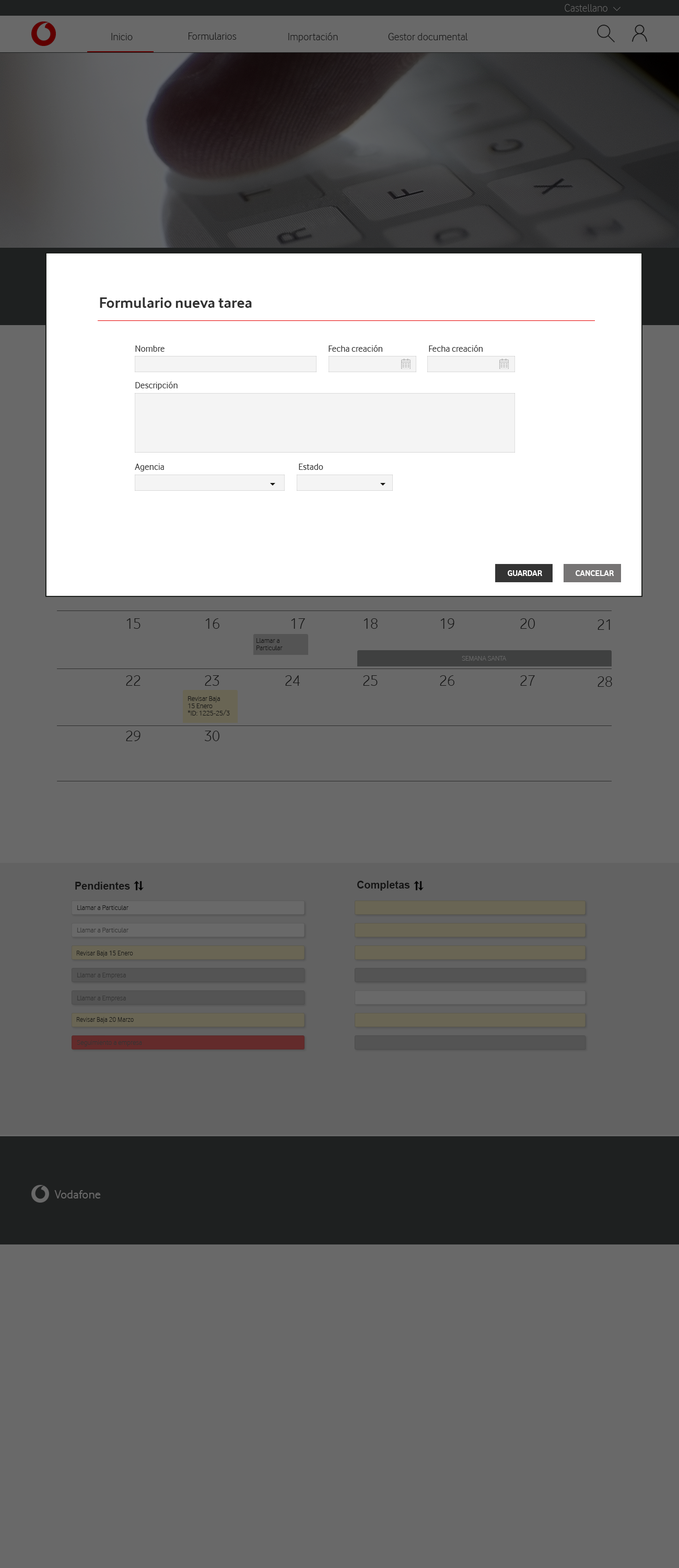
<style>
.page{position:relative;width:679px;height:1568px;background:#696969}
.page>*{position:absolute;margin:0}
.t1{font:11px "VodafoneLt-Regular";color:#696969}
.t2{font:11px "VodafoneLt-Regular";color:#151515}
.t3{font:15.7px "VodafoneRg-Bold";color:#333333}
.t4{font:9.4px "VodafoneRg-Regular";color:#333333}
.t5{font:8.3px "VodafoneRg-Bold";color:#ffffff}
.t6{font:15.7px "VodafoneLt-Regular";color:#151515}
.t7{font:7.3px/7.3px "VodafoneLt-Regular";color:#151515}
.t8{font:7.3px "VodafoneLt-Regular";color:#696969}
.t9{font:10.5px "Arial-BoldMT";color:#151515}
.t10{font:7.3px "VodafoneLt-Regular";color:#151515}
.t11{font:7.3px "VodafoneLt-Regular";color:#333333}
.t12{font:7.3px "VodafoneLt-Regular";color:#151515;scale:0.96 1}
.t13{font:12.5px "VodafoneRg-Regular";color:#696969}
</style>
<div class="page">
<p class="t1" style="left:565px;top:4px;width:43px;height:8px">Castellano</p>
<p class="t2" style="left:111px;top:33px;width:22px;height:7px">Inicio</p>
<p class="t2" style="left:189px;top:32px;width:48px;height:8px">Formularios</p>
<p class="t2" style="left:289px;top:32px;width:49px;height:10px">Importación</p>
<p class="t2" style="left:388px;top:33px;width:80px;height:7px">Gestor documental</p>
<p class="t3" style="left:100px;top:297px;width:152px;height:11px">Formulario nueva tarea</p>
<p class="t4" style="left:135px;top:345px;width:30px;height:7px">Nombre</p>
<p class="t4" style="left:329px;top:345px;width:54px;height:7px">Fecha creación</p>
<p class="t4" style="left:429px;top:345px;width:54px;height:7px">Fecha creación</p>
<p class="t4" style="left:135px;top:382px;width:43px;height:8px">Descripción</p>
<p class="t4" style="left:135px;top:464px;width:29px;height:7px">Agencia</p>
<p class="t4" style="left:299px;top:464px;width:25px;height:6px">Estado</p>
<p class="t5" style="left:508px;top:570px;width:35px;height:6px">GUARDAR</p>
<p class="t5" style="left:576px;top:570px;width:39px;height:6px">CANCELAR</p>
<p class="t6" style="left:126px;top:618px;width:15px;height:11px">15</p>
<p class="t6" style="left:205px;top:618px;width:15px;height:11px">16</p>
<p class="t6" style="left:291px;top:618px;width:14px;height:11px">17</p>
<p class="t6" style="left:364px;top:618px;width:14px;height:11px">18</p>
<p class="t6" style="left:441px;top:618px;width:14px;height:11px">19</p>
<p class="t6" style="left:521px;top:618px;width:14px;height:11px">20</p>
<p class="t6" style="left:598px;top:619px;width:12px;height:11px">21</p>
<p class="t7" style="left:257px;top:638px;width:26px;height:12px">Llamar a<br>Particular</p>
<p class="t8" style="left:462px;top:656px;width:45px;height:5px">SEMANA SANTA</p>
<p class="t6" style="left:126px;top:675px;width:15px;height:11px">22</p>
<p class="t6" style="left:205px;top:675px;width:15px;height:11px">23</p>
<p class="t6" style="left:285px;top:675px;width:15px;height:11px">24</p>
<p class="t6" style="left:363px;top:675px;width:15px;height:11px">25</p>
<p class="t6" style="left:440px;top:675px;width:15px;height:11px">26</p>
<p class="t6" style="left:521px;top:675px;width:14px;height:11px">27</p>
<p class="t6" style="left:598px;top:676px;width:15px;height:11px">28</p>
<p class="t7" style="left:188px;top:696px;width:42px;height:20px">Revisar Baja<br>15 Enero<br>*ID: 1225-25/3</p>
<p class="t6" style="left:126px;top:731px;width:15px;height:10px">29</p>
<p class="t6" style="left:205px;top:731px;width:15px;height:10px">30</p>
<p class="t9" style="left:75px;top:882px;width:55px;height:8px">Pendientes</p>
<p class="t9" style="left:358px;top:881px;width:52px;height:10px">Completas</p>
<p class="t10" style="left:77px;top:905px;width:52px;height:5px">Llamar a Particular</p>
<p class="t11" style="left:77px;top:928px;width:52px;height:4px">Llamar a Particular</p>
<p class="t12" style="left:76px;top:951px;width:57px;height:6px">Revisar Baja 15 Enero</p>
<p class="t11" style="left:77px;top:973px;width:49px;height:6px">Llamar a Empresa</p>
<p class="t11" style="left:77px;top:996px;width:49px;height:6px">Llamar a Empresa</p>
<p class="t12" style="left:76px;top:1017px;width:58px;height:6px">Revisar Baja 20 Marzo</p>
<p class="t11" style="left:77px;top:1040px;width:65px;height:6px">Seguimiento a empresa</p>
<p class="t13" style="left:54px;top:1190px;width:47px;height:8px">Vodafone</p>
</div>
